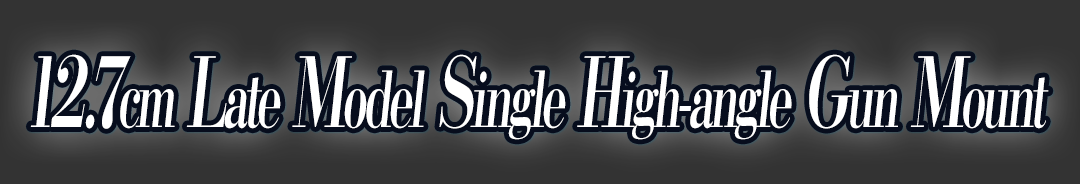
<style>
.page{position:relative;width:1080px;height:184px;background:#333333}
.page>*{position:absolute;margin:0}
.t1{font:76.8px "KochoStd-Heavy";letter-spacing:-0.08em;color:#ffffff;font-style:italic;scale:0.6 1}
.t2{font:96px "KochoStd-Heavy";letter-spacing:-0.08em;color:#ffffff;font-style:italic;scale:0.6 1}
</style>
<div class="page">
<p class="t1" style="left:30px;top:54px;width:1019px;height:86px"><span class="t2">12.7</span>cm<span class="t2"> L</span>ate<span class="t2"> M</span>odel<span class="t2"> S</span>ingle<span class="t2"> H</span>igh-angle<span class="t2"> G</span>un<span class="t2"> M</span>ount</p>
</div>
